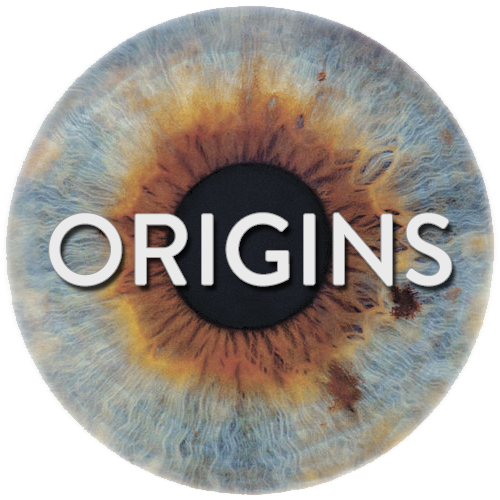
<style>
.page{position:relative;width:500px;height:500px;background:#ffffff}
.page>*{position:absolute;margin:0}
.t1{font:100px "BrandonGrotesque-Medium";color:#eaeaea}
</style>
<div class="page">
<p class="t1" style="left:49px;top:213px;width:403px;height:73px">ORIGINS</p>
</div>
